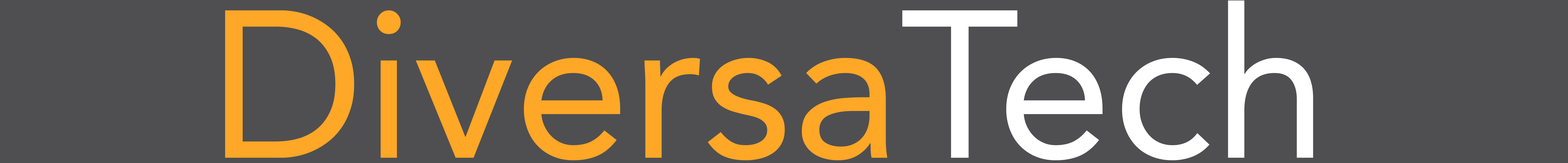
<style>
.page{position:relative;width:1568px;height:163px;background:#4f4f51}
.page>*{position:absolute;margin:0}
.t1{font:208.2px "Avenir-Roman";color:#ffa726}
.t2{font:208.2px "Avenir-Roman";color:#ffffff}
</style>
<div class="page">
<p class="t1" style="left:225px;top:0px;width:1088px;height:161px">Diversa<span class="t2">Tech</span></p>
</div>
